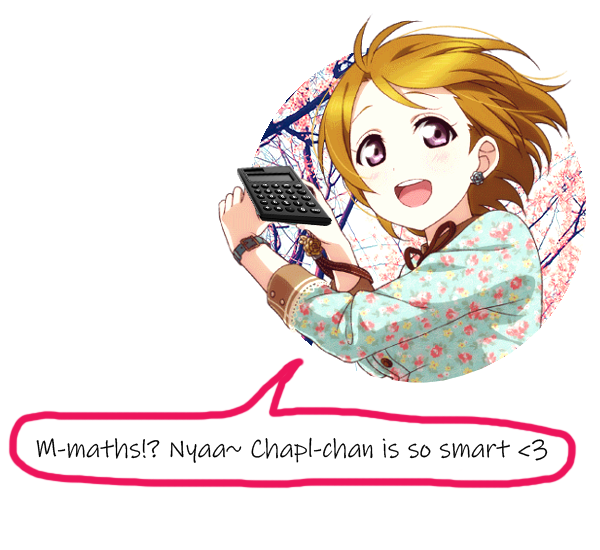
<style>
.page{position:relative;width:600px;height:550px;background:#ffffff}
.page>*{position:absolute;margin:0}
.t1{font:27px "InkFree";color:#000000}
</style>
<div class="page">
<p class="t1" style="left:36px;top:437px;width:512px;height:26px">M-maths!? Nyaa~ Chapl-chan is so smart &lt;3</p>
</div>
